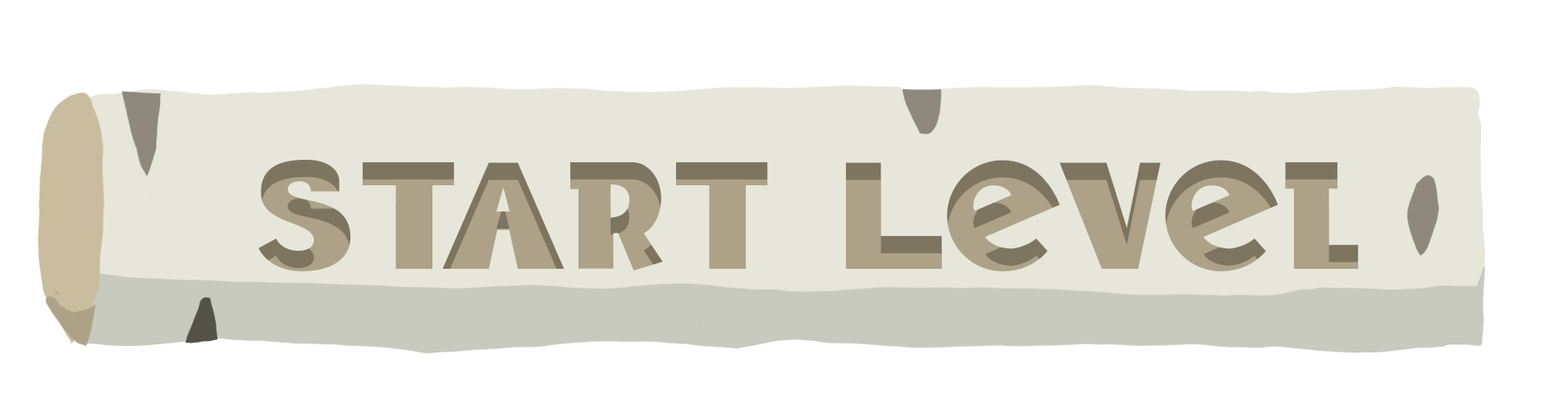
<style>
.page{position:relative;width:1568px;height:409px;background:#ffffff}
.page>*{position:absolute;margin:0}
.t1{font:148px "BadTyp-Regular";color:#ada288}
</style>
<div class="page">
<p class="t1" style="left:258px;top:159px;width:1101px;height:113px">Start Level</p>
</div>
